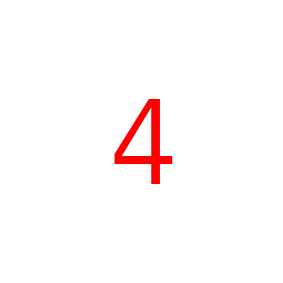
<style>
.page{position:relative;width:283px;height:283px;background:#ffffff}
.page>*{position:absolute;margin:0}
.t1{font:120px "Avenir-Book";color:#ff0000}
</style>
<div class="page">
<p class="t1" style="left:114px;top:99px;width:59px;height:85px">4</p>
</div>
